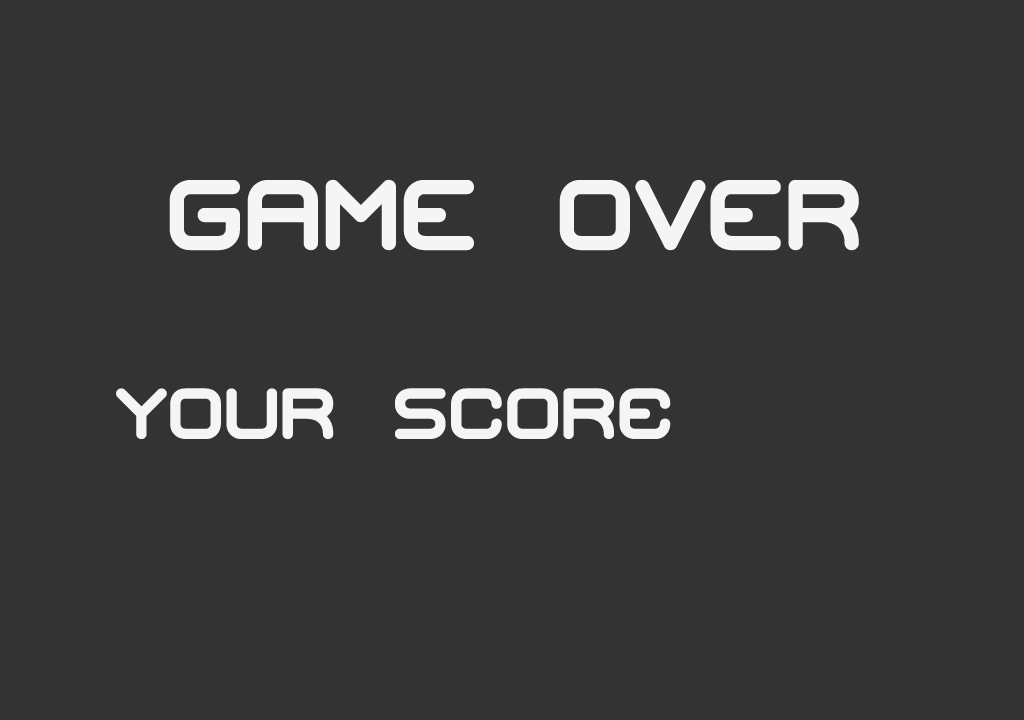
<style>
.page{position:relative;width:1024px;height:720px;background:#333333}
.page>*{position:absolute;margin:0}
.t1{font:100px "MishmashBRK";color:#f5f5f5}
.t2{font:72px "MishmashBRK";color:#f5f5f5}
</style>
<div class="page">
<p class="t1" style="left:169px;top:179px;width:690px;height:72px">GAME OVER</p>
<p class="t2" style="left:116px;top:388px;width:555px;height:51px">Your score</p>
</div>
